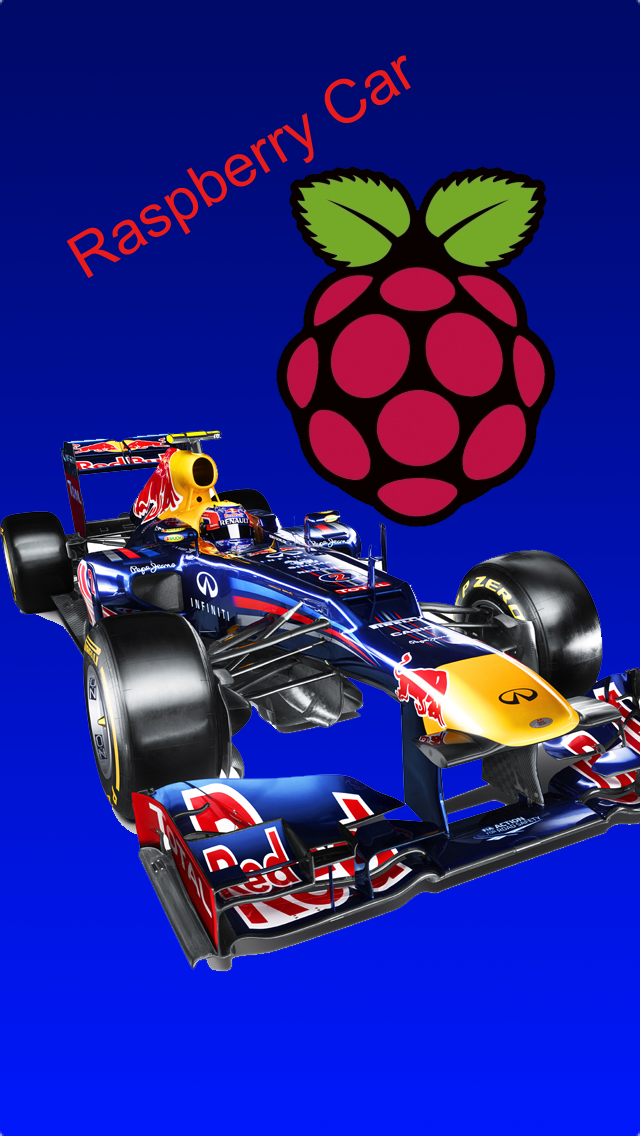
<style>
.page{position:relative;width:640px;height:1136px}
.page>*{position:absolute;margin:0}
.t1{font:60px "ArialMT";color:#e91b1b}
</style>
<div class="page">
<p class="t1" style="left:66px;top:55px;width:345px;height:223px;rotate:-31deg">Raspberry Car</p>
</div>
